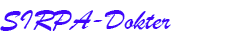
<style>
.page{position:relative;width:240px;height:40px;background:#ffffff}
.page>*{position:absolute;margin:0}
.t1{font:30px "BrushScriptMT";color:#4006fb}
</style>
<div class="page">
<p class="t1" style="left:0px;top:10px;width:171px;height:21px">SIRPA-Dokter</p>
</div>
